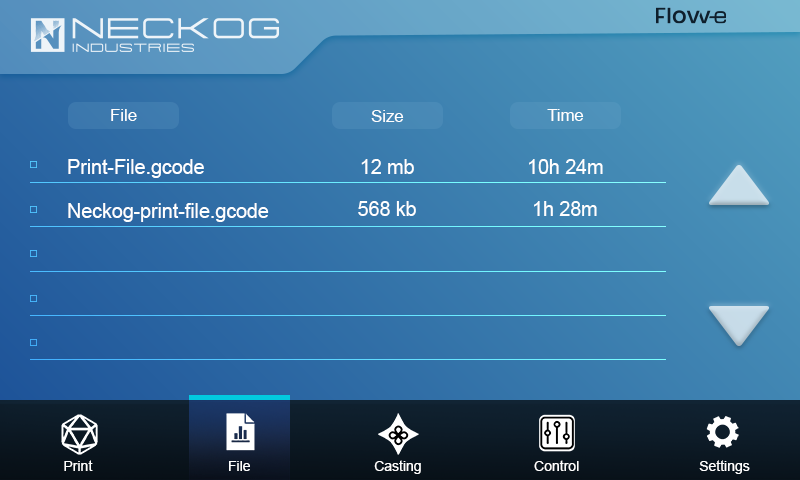
<style>
.page{position:relative;width:800px;height:480px}
.page>*{position:absolute;margin:0}
.t1{font:16.7px "ArialMT";color:#ffffff}
.t2{font:19.5px "ArialMT";color:#ffffff}
.t3{font:14px "ArialMT";color:#ffffff}
</style>
<div class="page">
<p class="t1" style="left:111px;top:109px;width:26px;height:12px">File</p>
<p class="t1" style="left:371px;top:110px;width:33px;height:12px">Size</p>
<p class="t1" style="left:547px;top:109px;width:37px;height:12px">Time</p>
<p class="t2" style="left:68px;top:159px;width:136px;height:19px">Print-File.gcode</p>
<p class="t2" style="left:361px;top:159px;width:53px;height:15px">12 mb</p>
<p class="t2" style="left:529px;top:159px;width:74px;height:15px">10h 24m</p>
<p class="t2" style="left:68px;top:203px;width:201px;height:19px">Neckog-print-file.gcode</p>
<p class="t2" style="left:358px;top:201px;width:58px;height:15px">568 kb</p>
<p class="t2" style="left:534px;top:201px;width:63px;height:15px">1h 28m</p>
<p class="t3" style="left:64px;top:460px;width:29px;height:11px">Print</p>
<p class="t3" style="left:229px;top:461px;width:21px;height:10px">File</p>
<p class="t3" style="left:374px;top:460px;width:47px;height:14px">Casting</p>
<p class="t3" style="left:534px;top:460px;width:45px;height:11px">Control</p>
<p class="t3" style="left:699px;top:460px;width:51px;height:14px">Settings</p>
</div>
